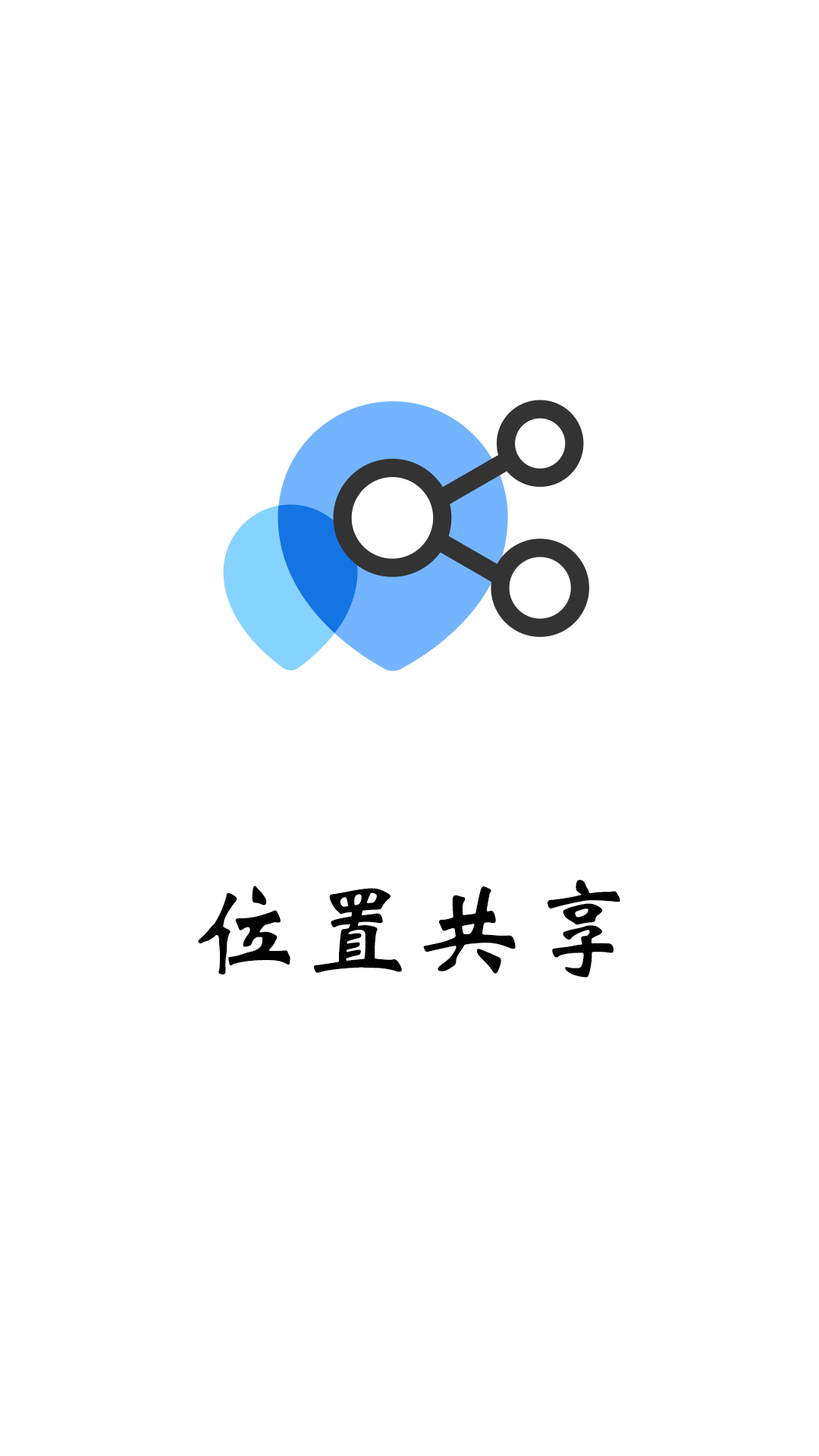
<style>
.page{position:relative;width:819px;height:1456px;background:#ffffff}
.page>*{position:absolute;margin:0}
.t1{font:109.2px "STXinwei";color:#000000;font-weight:bold}
</style>
<div class="page">
<p class="t1" style="left:198px;top:880px;width:422px;height:97px">位置共享</p>
</div>
